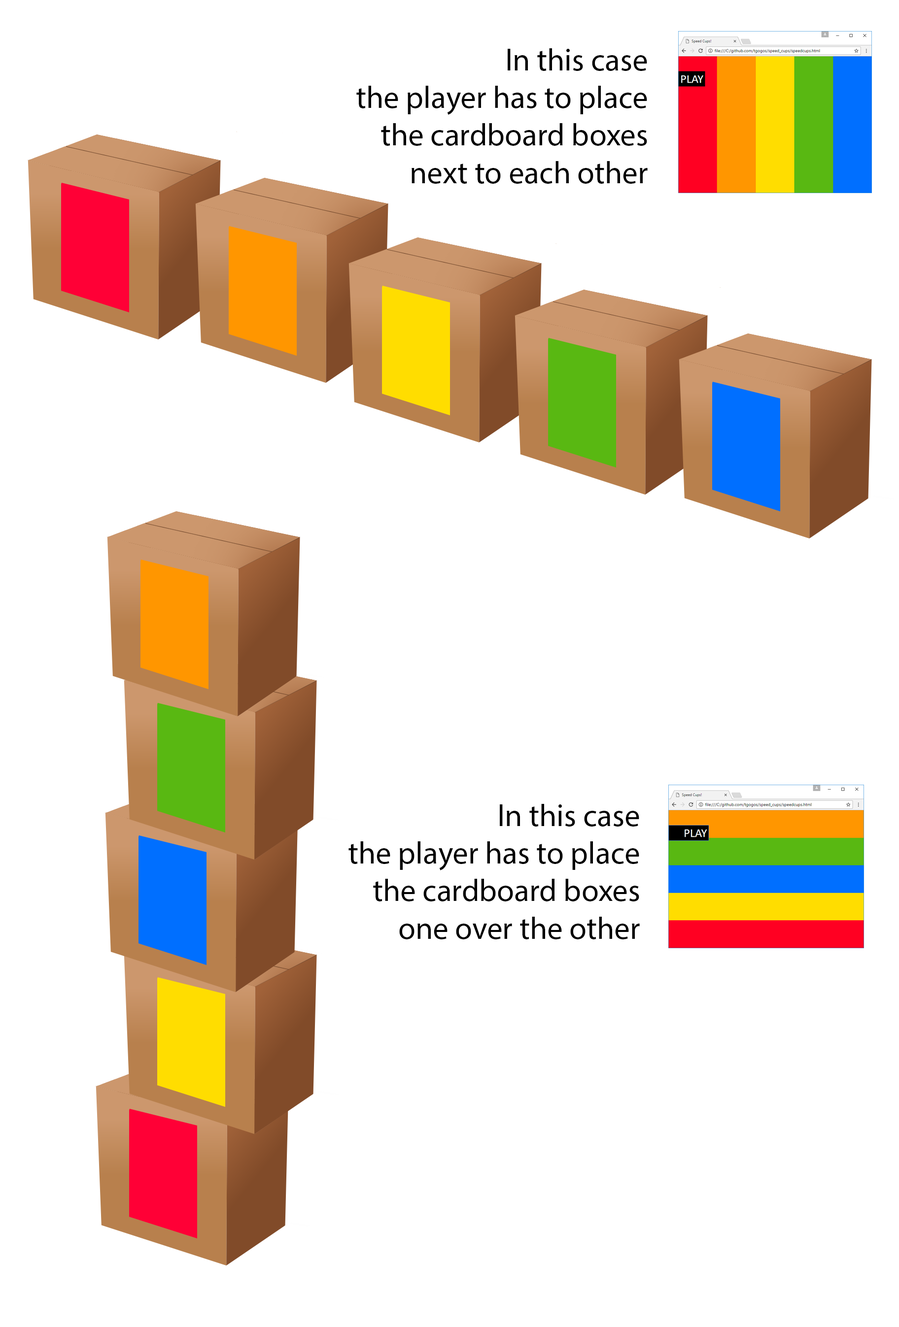
<style>
.page{position:relative;width:899px;height:1327px;background:#ffffff}
.page>*{position:absolute;margin:0}
.t1{font:26.3px "MyriadPro-Regular";color:#000000}
</style>
<div class="page">
<p class="t1" style="left:356px;top:48px;width:291px;height:136px;text-align:right">In this case<br>the player has to place<br>the cardboard boxes<br>next to each other</p>
<p class="t1" style="left:348px;top:804px;width:291px;height:135px;text-align:right">In this case<br>the player has to place<br>the cardboard boxes<br>one over the other</p>
</div>
